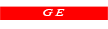
<style>
.page{position:relative;width:108px;height:29px;background:#ffffff}
.page>*{position:absolute;margin:0}
.t1{font:14px "Vijaya";letter-spacing:0.14em;color:#ffffff;scale:1.29 1}
</style>
<div class="page">
<p class="t1" style="left:43px;top:9px;width:22px;height:7px">GE</p>
</div>
